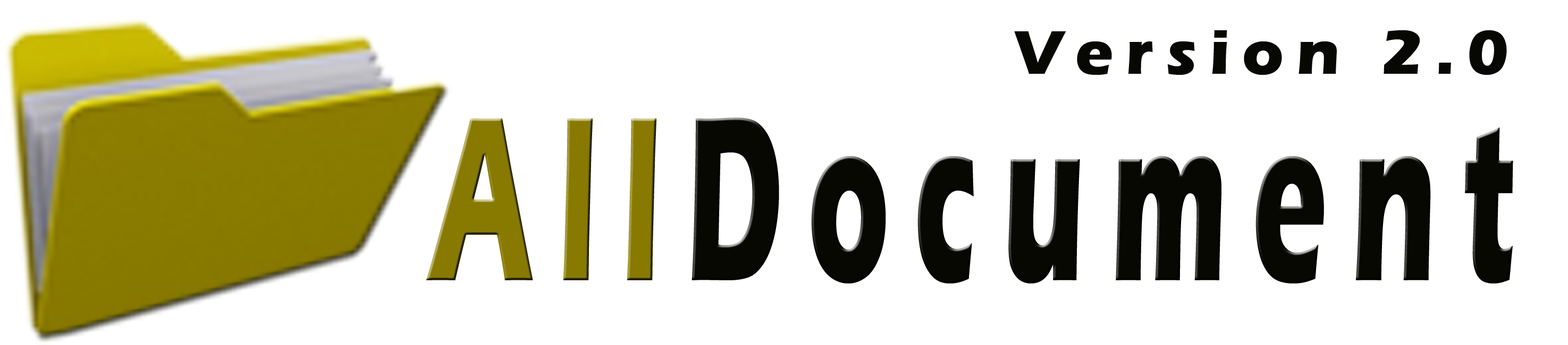
<style>
.page{position:relative;width:1568px;height:345px;background:#ffffff}
.page>*{position:absolute;margin:0}
.t1{font:63.8px "ErasITC-Bold";letter-spacing:0.2em;color:#070801}
.t2{font:243.3px "ErasITC-Bold";letter-spacing:0.2em;color:#070801;scale:0.52 1}
.t3{font:243.3px "ErasITC-Bold";letter-spacing:0.2em;color:#887a00;scale:0.52 1}
</style>
<div class="page">
<p class="t1" style="left:1014px;top:30px;width:493px;height:45px">Version 2.0</p>
<p class="t2" style="left:426px;top:117px;width:1087px;height:167px"><span class="t3">All</span>Document</p>
</div>
